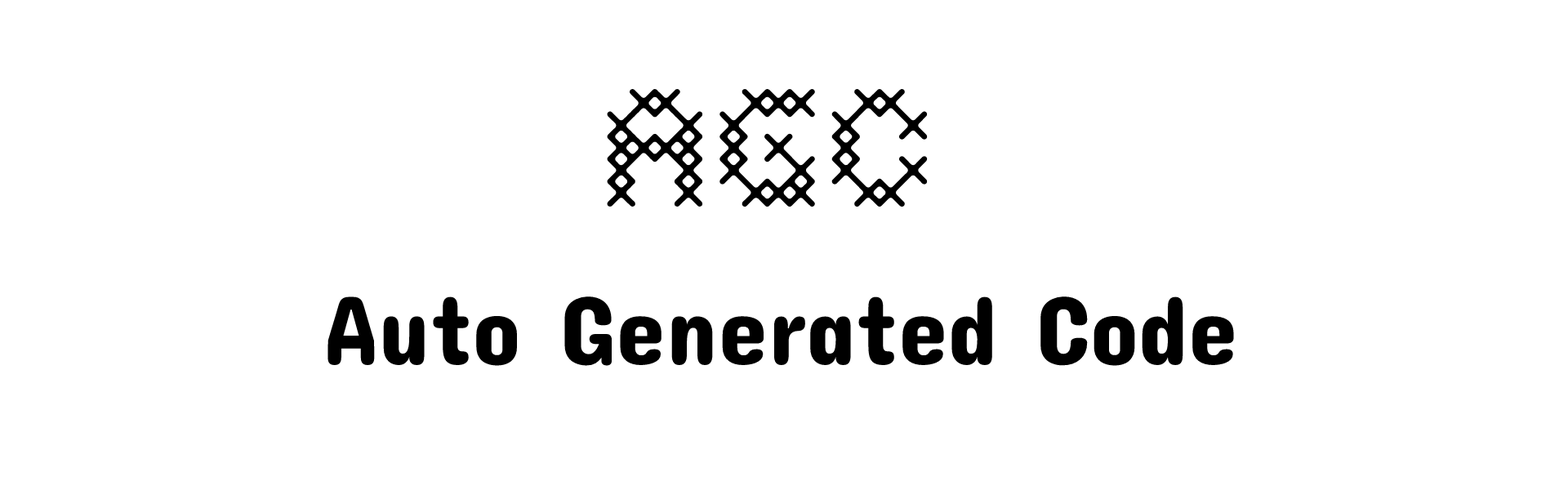
<style>
.page{position:relative;width:1568px;height:490px;background:#ffffff}
.page>*{position:absolute;margin:0}
.t1{font:147px "Costura-Light";color:#000000}
.t2{font:99.6px "ConcertOne-Regular";color:#000000}
</style>
<div class="page">
<p class="t1" style="left:607px;top:88px;width:321px;height:119px">AGC</p>
<p class="t2" style="left:327px;top:296px;width:907px;height:70px">Auto Generated Code</p>
</div>
